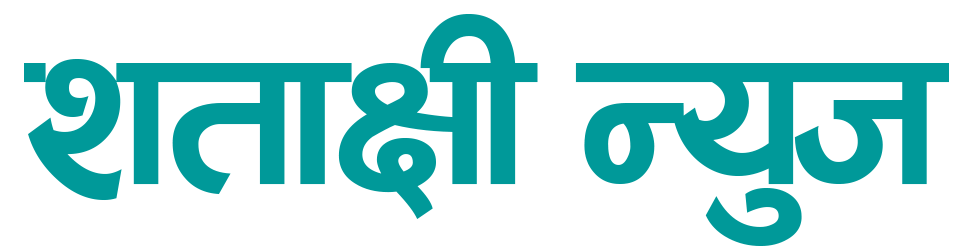
<style>
.page{position:relative;width:960px;height:252px;background:#ffffff}
.page>*{position:absolute;margin:0}
.t1{font:256.7px "0001ARAPBK";letter-spacing:-0.04em;color:#009999}
</style>
<div class="page">
<p class="t1" style="left:24px;top:14px;width:925px;height:232px">ztfIfL Go'h</p>
</div>
